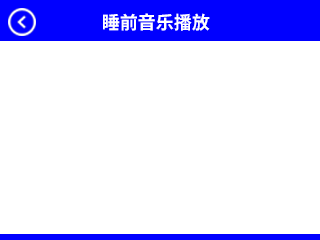
<style>
.page{position:relative;width:320px;height:240px;background:#ffffff}
.page>*{position:absolute;margin:0}
.t1{font:18px "SourceHanSansSC-Bold";color:#ffffff}
</style>
<div class="page">
<p class="t1" style="left:103px;top:13px;width:107px;height:18px">睡前音乐播放</p>
</div>
